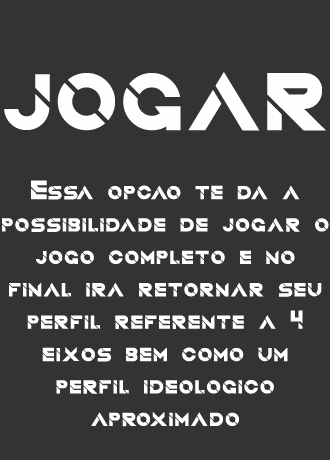
<style>
.page{position:relative;width:330px;height:460px;background:#333333}
.page>*{position:absolute;margin:0}
.t1{font:83px "QuantumRegular";color:#fefefe}
.t2{font:27px "QuantumRegular";color:#ffffff}
</style>
<div class="page">
<p class="t1" style="left:4px;top:72px;width:322px;height:59px">JOGAR</p>
<p class="t2" style="left:2px;top:180px;width:327px;height:247px;text-align:center">Essa opção te da a possibilidade de jogar o jogo completo e no final ira retornar seu perfil referente a 4 eixos bem como um perfil ideológico aproximado</p>
</div>
